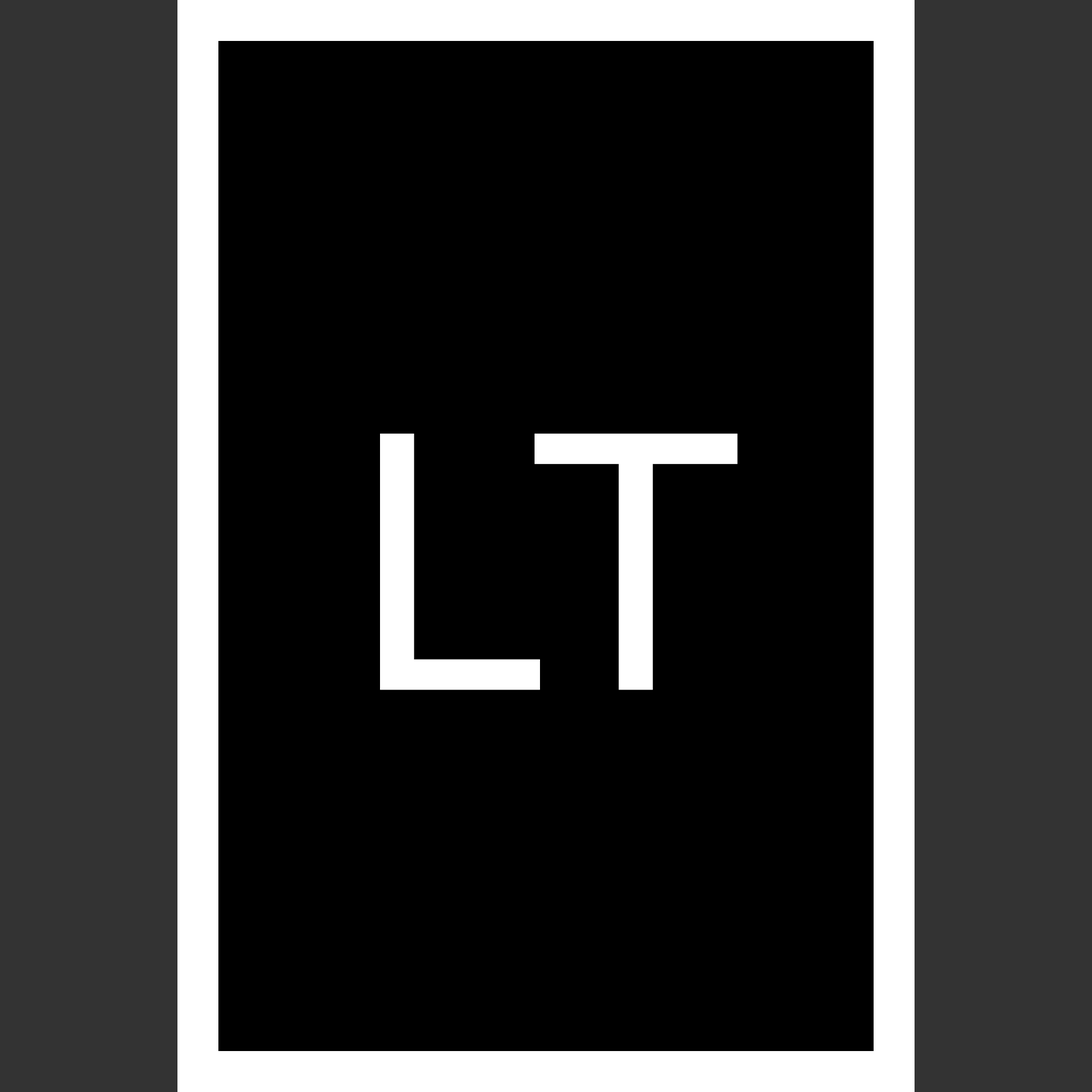
<style>
.page{position:relative;width:1092px;height:1092px;background:#000000}
.page>*{position:absolute;margin:0}
.t1{font:357.5px "ArialMT";color:#ffffff}
</style>
<div class="page">
<p class="t1" style="left:380px;top:434px;width:358px;height:256px">LT</p>
</div>
